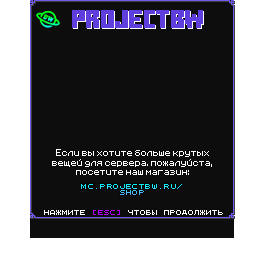
<style>
.page{position:relative;width:256px;height:256px;background:#0d0d0d}
.page>*{position:absolute;margin:0}
.t1{font:18px "MinecraftTenfontcyrillic";color:#5e3fde;text-transform:uppercase}
.t2{font:8px "Minecraft";color:#ffffff}
.t3{font:5.3px "QuinqueFive";text-transform:uppercase}
.t4{font:5px "QuinqueFive";color:#ffffff;text-transform:uppercase}
.t5{font:5px "QuinqueFive";color:#ae00ff;text-transform:uppercase}
</style>
<div class="page">
<p class="t1" style="left:72px;top:10px;width:131px;height:18px">PROJECTBW</p>
<p class="t1" style="left:73px;top:11px;width:131px;height:18px">PROJECTBW</p>
<p class="t2" style="left:52px;top:149px;width:160px;height:26px;text-align:center">Если вы хотите больше крутых вещей для сервера. пожалуйста, посетите наш магазин:</p>
<p class="t3" style="left:81px;top:184px;width:101px;height:11px;text-align:center">MC.PROJECTBW.RU/<br>SHOP</p>
<p class="t4" style="left:44px;top:210px;width:179px;height:5px">НАЖМИТЕ <span class="t5">[ESC]</span> ЧТОБЫ ПРОДОЛЖИТЬ</p>
</div>
